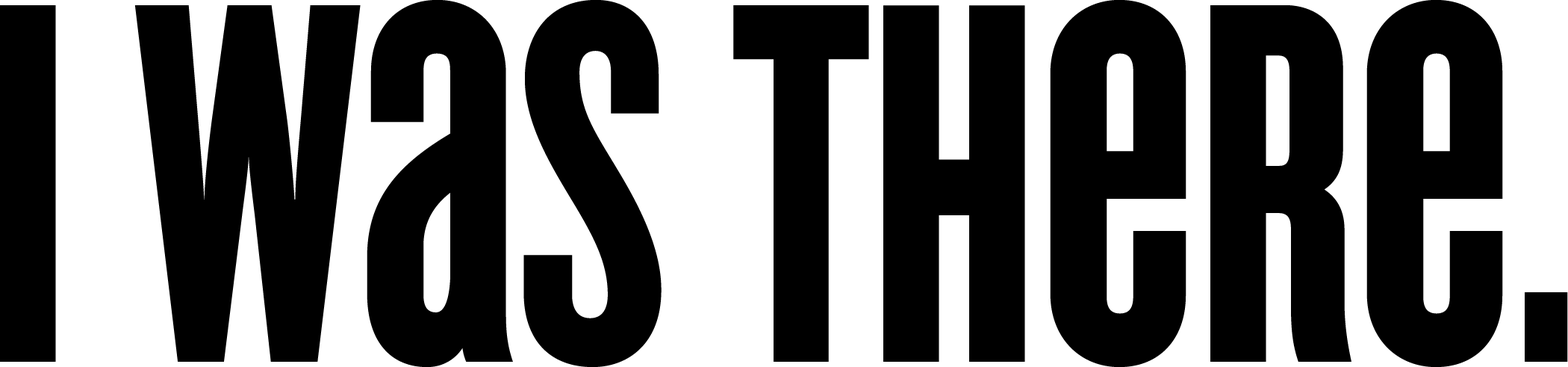
<style>
.page{position:relative;width:1568px;height:367px;background:#000000}
.page>*{position:absolute;margin:0}
.t1{font:534.7px "CycloneLayers-Background";color:#000000}
</style>
<div class="page">
<p class="t1" style="left:0px;top:0px;width:1568px;height:367px">I was there.</p>
</div>
